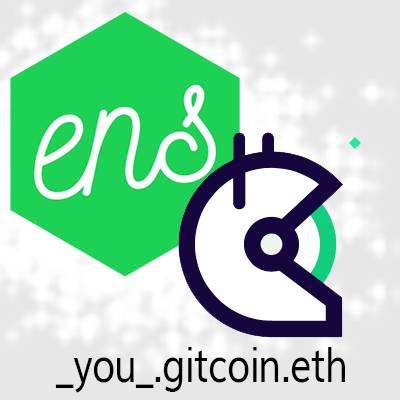
<style>
.page{position:relative;width:400px;height:400px;background:#e7e7e7}
.page>*{position:absolute;margin:0}
.t1{font:48px "Muli";letter-spacing:-0.025em;color:#000000;scale:0.8 1}
</style>
<div class="page">
<p class="t1" style="left:55px;top:347px;width:290px;height:46px">_you_.gitcoin.eth</p>
</div>
